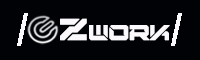
<style>
.page{position:relative;width:200px;height:60px;background:#000206}
.page>*{position:absolute;margin:0}
.t1{font:41.7px "Arial-Black";color:#fbf9fb;font-variant:small-caps;font-weight:bold;scale:0.82 1}
.t2{font:25.8px "Digital-Desolation-Plus";color:#fbf9fb;font-variant:small-caps;font-weight:bold}
</style>
<div class="page">
<p class="t1" style="left:17px;top:13px;width:11px;height:33px">/</p>
<p class="t1" style="left:171px;top:13px;width:11px;height:33px">/</p>
<p class="t2" style="left:60px;top:18px;width:110px;height:23px">Zwork</p>
</div>
